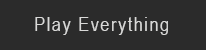
<style>
.page{position:relative;width:206px;height:50px;background:#2b2b2b}
.page>*{position:absolute;margin:0}
.t1{font:20px "ArialNarrow";letter-spacing:0.075em;color:#d9d9d8}
</style>
<div class="page">
<p class="t1" style="left:35px;top:17px;width:133px;height:18px">Play Everything</p>
</div>
